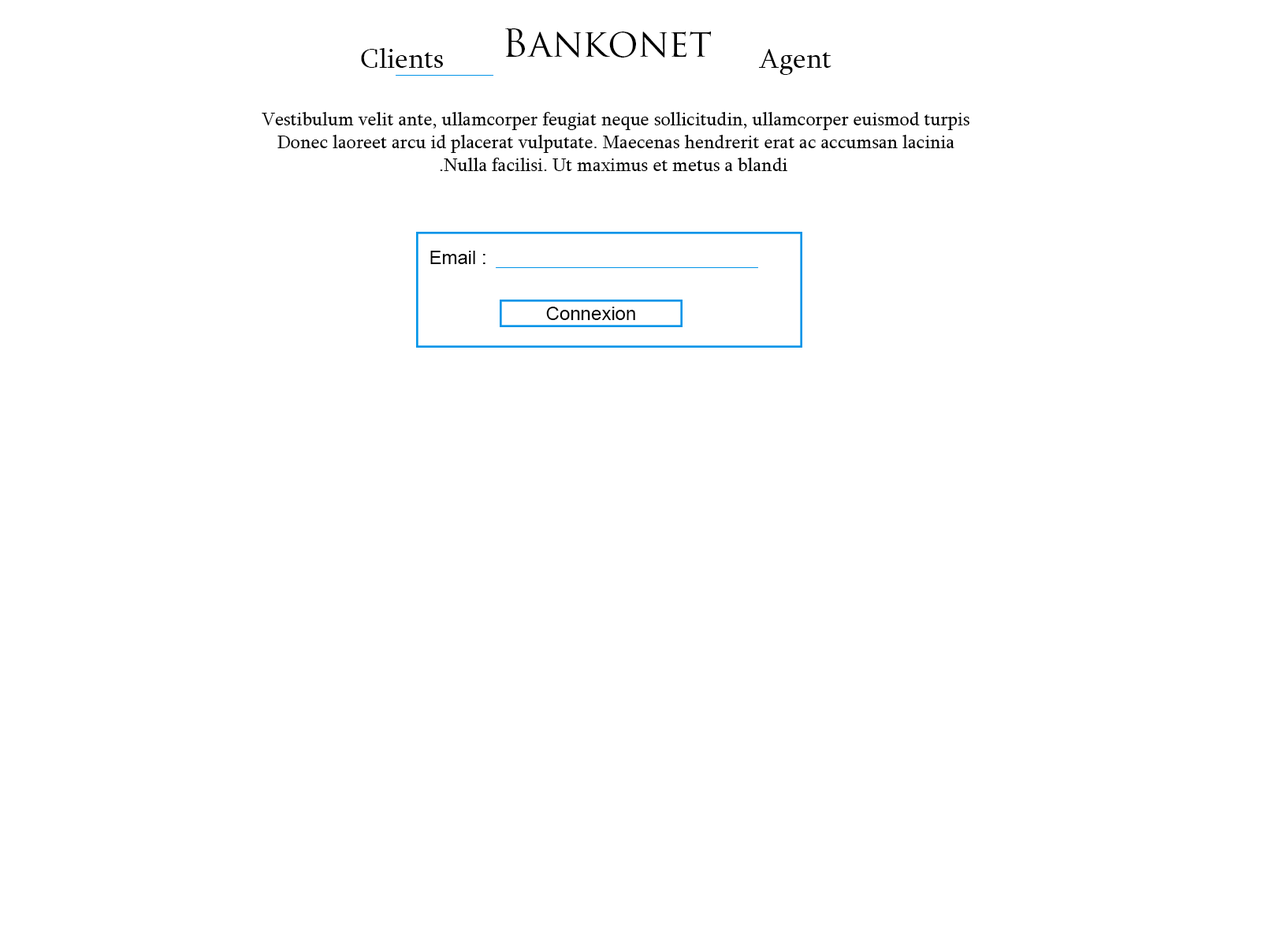
<style>
.page{position:relative;width:1261px;height:946px;background:#ffffff}
.page>*{position:absolute;margin:0}
.t1{font:37.8px "TrajanPro-Regular";color:#000000}
.t2{font:28.4px "Sylfaen";color:#000000}
.t3{font:18.9px "Sylfaen";color:#000000}
.t4{font:18.9px "ArialMT";color:#000000}
</style>
<div class="page">
<p class="t1" style="left:505px;top:28px;width:206px;height:30px">Bankonet</p>
<p class="t2" style="left:361px;top:48px;width:82px;height:20px">Clients</p>
<p class="t2" style="left:759px;top:49px;width:72px;height:26px">Agent</p>
<p class="t3" style="left:262px;top:112px;width:707px;height:59px;text-align:center">Vestibulum velit ante, ullamcorper feugiat neque sollicitudin, ullamcorper euismod turpis <br>Donec laoreet arcu id placerat vulputate. Maecenas hendrerit erat ac accumsan lacinia <br>Nulla facilisi. Ut maximus et metus a blandi.</p>
<p class="t4" style="left:430px;top:251px;width:55px;height:13px">Email :</p>
<p class="t4" style="left:546px;top:307px;width:89px;height:13px">Connexion</p>
</div>
